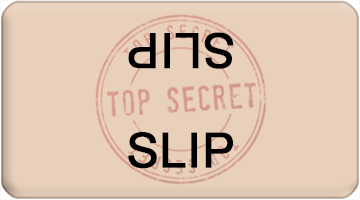
<style>
.page{position:relative;width:360px;height:200px;background:#e8d0bb}
.page>*{position:absolute;margin:0}
.t1{font:48px "ArialMT";color:#000000;font-weight:bold}
</style>
<div class="page">
<p class="t1" style="left:128px;top:32px;width:106px;height:37px;rotate:180deg">SLIP</p>
<p class="t1" style="left:128px;top:132px;width:105px;height:37px">SLIP</p>
</div>
